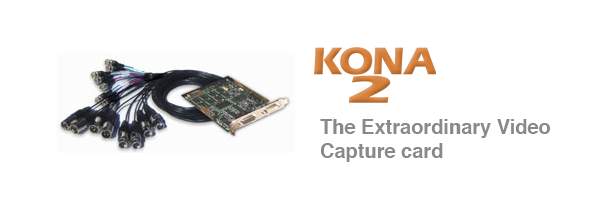
<style>
.page{position:relative;width:590px;height:200px;background:#ffffff}
.page>*{position:absolute;margin:0}
.t1{font:20px "Helvetica-Bold";color:#898989}
</style>
<div class="page">
<p class="t1" style="left:320px;top:119px;width:230px;height:43px">The Extraordinary Video<br>Capture card</p>
</div>
